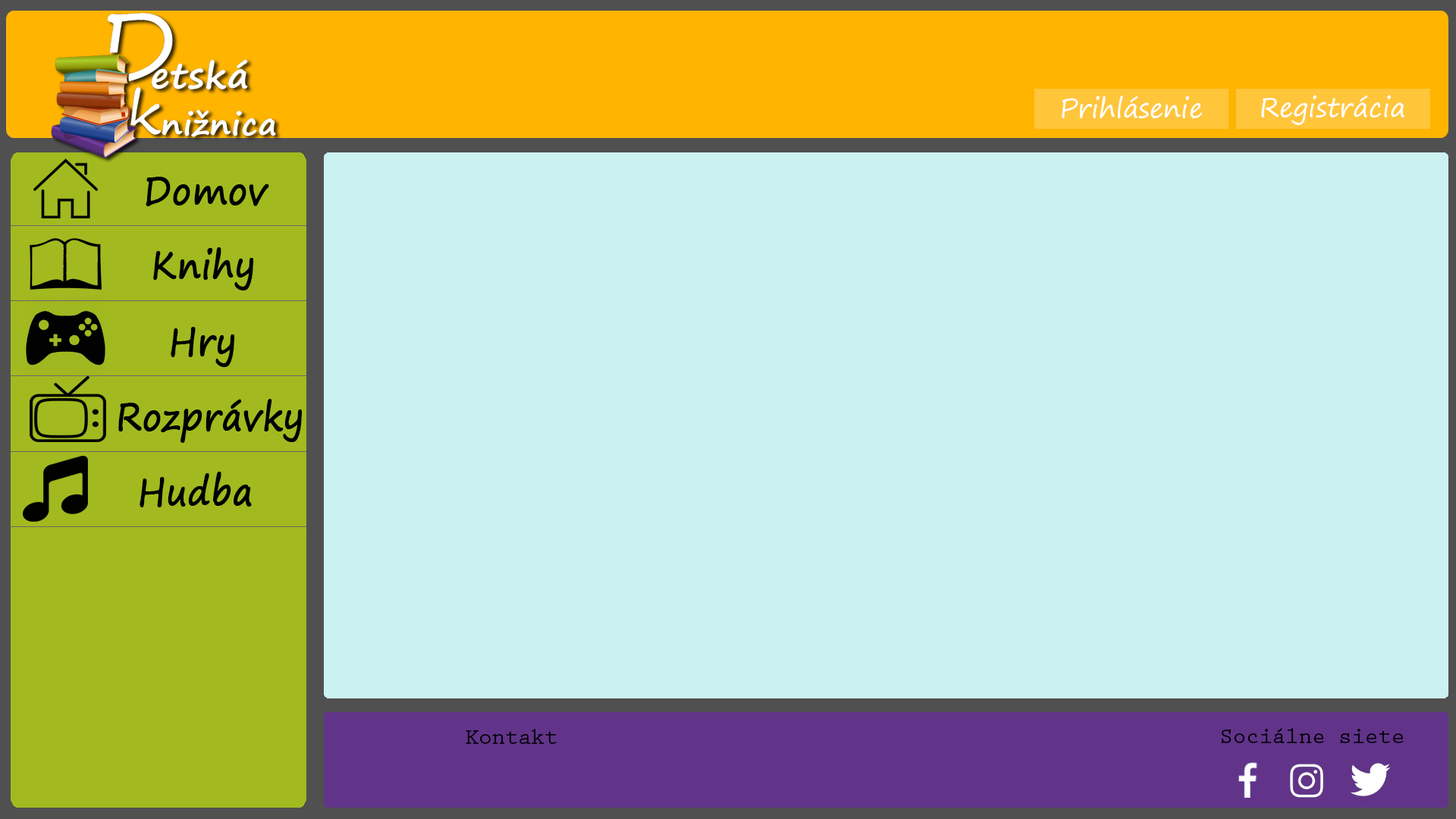
<style>
.page{position:relative;width:1456px;height:819px;background:#cbf1f0}
.page>*{position:absolute;margin:0}
.t1{font:26.5px "SegoePrint";color:#ffffff}
.t2{font:37.9px "SegoePrint";color:#000000;font-weight:bold;scale:0.9 1}
.t3{font:22.7px "PrestigeEliteStd-Bd";letter-spacing:-0.02em;color:#000000}
</style>
<div class="page">
<p class="t1" style="left:1062px;top:96px;width:140px;height:23px">Prihlásenie</p>
<p class="t1" style="left:1261px;top:95px;width:143px;height:30px">Registrácia</p>
<p class="t2" style="left:146px;top:177px;width:123px;height:29px">Domov</p>
<p class="t2" style="left:153px;top:247px;width:100px;height:43px">Knihy</p>
<p class="t2" style="left:171px;top:327px;width:63px;height:40px">Hry</p>
<p class="t2" style="left:118px;top:399px;width:184px;height:44px">Rozprávky</p>
<p class="t2" style="left:140px;top:472px;width:112px;height:35px">Hudba</p>
<p class="t3" style="left:466px;top:729px;width:91px;height:15px">Kontakt</p>
<p class="t3" style="left:1221px;top:728px;width:183px;height:15px">Sociálne siete</p>
</div>
